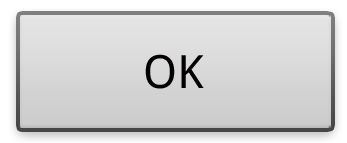
<style>
.page{position:relative;width:347px;height:143px}
.page>*{position:absolute;margin:0}
.t1{font:45.8px "DroidSans";color:#030000}
</style>
<div class="page">
<p class="t1" style="left:145px;top:54px;width:59px;height:35px">OK</p>
</div>
